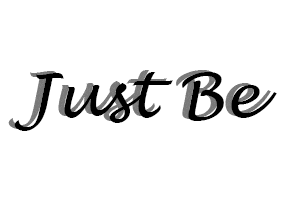
<style>
.page{position:relative;width:300px;height:200px;background:#ffffff}
.page>*{position:absolute;margin:0}
.t1{font:61.8px "LucidaHandwriting-Italic";color:#000000}
</style>
<div class="page">
<p class="t1" style="left:14px;top:72px;width:263px;height:59px">Just Be</p>
</div>
